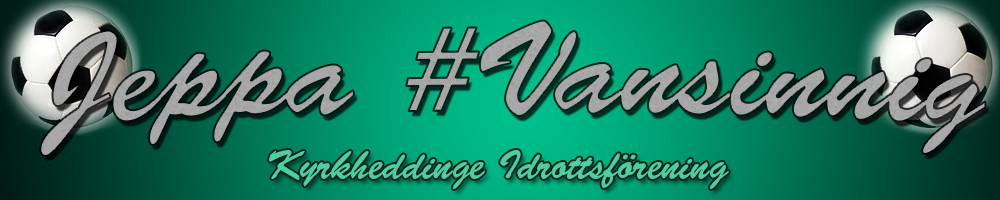
<style>
.page{position:relative;width:1000px;height:200px}
.page>*{position:absolute;margin:0}
.t1{font:130px "BrushScriptStd";color:#a6a6a6}
.t2{font:40px "BrushScriptStd";color:#52cda2}
</style>
<div class="page">
<p class="t1" style="left:40px;top:20px;width:946px;height:136px">Jeppa #Vansinnig</p>
<p class="t2" style="left:269px;top:150px;width:460px;height:39px">Kyrkheddinge Idrottsförening</p>
</div>
